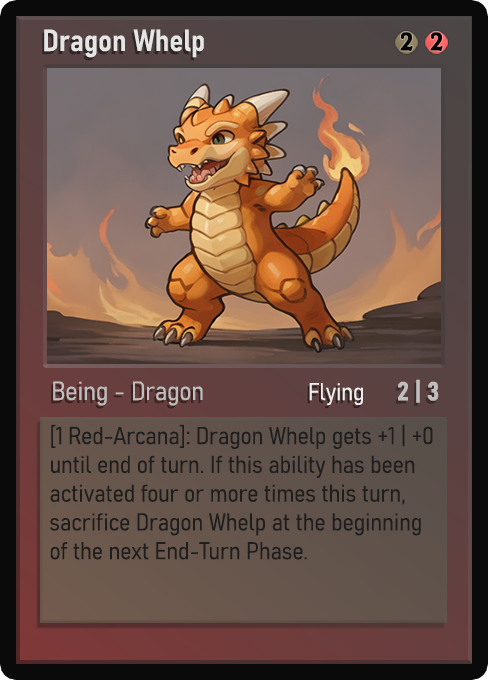
<style>
.page{position:relative;width:488px;height:680px}
.page>*{position:absolute;margin:0}
.t1{font:30px "Bahnschrift-SemiBoldSemiCondensed";color:#f2f2f2;font-weight:bold}
.t2{font:25px "WTRRoycroft";color:#000000;font-weight:bold;scale:1.09 1}
.t3{font:26px "Bahnschrift-LightSemiCondensed";color:#c8c8c8;font-weight:bold}
.t4{font:24px "Bahnschrift-LightSemiCondensed";color:#f0efef;font-weight:bold}
.t5{font:26px "Bahnschrift-BoldSemiCondensed";color:#c1bdbd;font-weight:bold}
.t6{font:24px "Bahnschrift-LightSemiCondensed";color:#1e1e1e;font-weight:bold}
</style>
<div class="page">
<p class="t1" style="left:44px;top:29px;width:160px;height:29px;opacity:0.9">Dragon Whelp</p>
<p class="t2" style="left:400px;top:32px;width:13px;height:19px">2</p>
<p class="t2" style="left:430px;top:32px;width:13px;height:19px">2</p>
<p class="t3" style="left:53px;top:381px;width:150px;height:25px;opacity:0.9">Being - Dragon</p>
<p class="t4" style="left:309px;top:383px;width:54px;height:23px">Flying</p>
<p class="t5" style="left:398px;top:379px;width:41px;height:24px">2 | 3</p>
<p class="t6" style="left:50px;top:424px;width:383px;height:136px">[1 Red-Arcana]: Dragon Whelp gets +1 | +0 until end of turn. If this ability has been activated four or more times this turn, sacrifice Dragon Whelp at the beginning of the next End-Turn Phase.</p>
</div>
